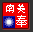
<style>
.page{position:relative;width:33px;height:32px;background:#f20000}
.page>*{position:absolute;margin:0}
.t1{font:10.4px "SimSun";color:#ffffff}
.t2{font:11.7px "SimSun";color:#ffffff}
</style>
<div class="page">
<p class="t1" style="left:6px;top:4px;width:19px;height:9px">南美</p>
<p class="t2" style="left:16px;top:15px;width:11px;height:12px">奉</p>
</div>
